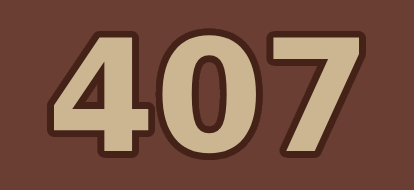
<style>
.page{position:relative;width:414px;height:190px;background:#6a3e32}
.page>*{position:absolute;margin:0}
.t1{font:155.8px "DejaVuSans-Bold";color:#ccb692}
</style>
<div class="page">
<p class="t1" style="left:53px;top:35px;width:307px;height:119px">407</p>
</div>
